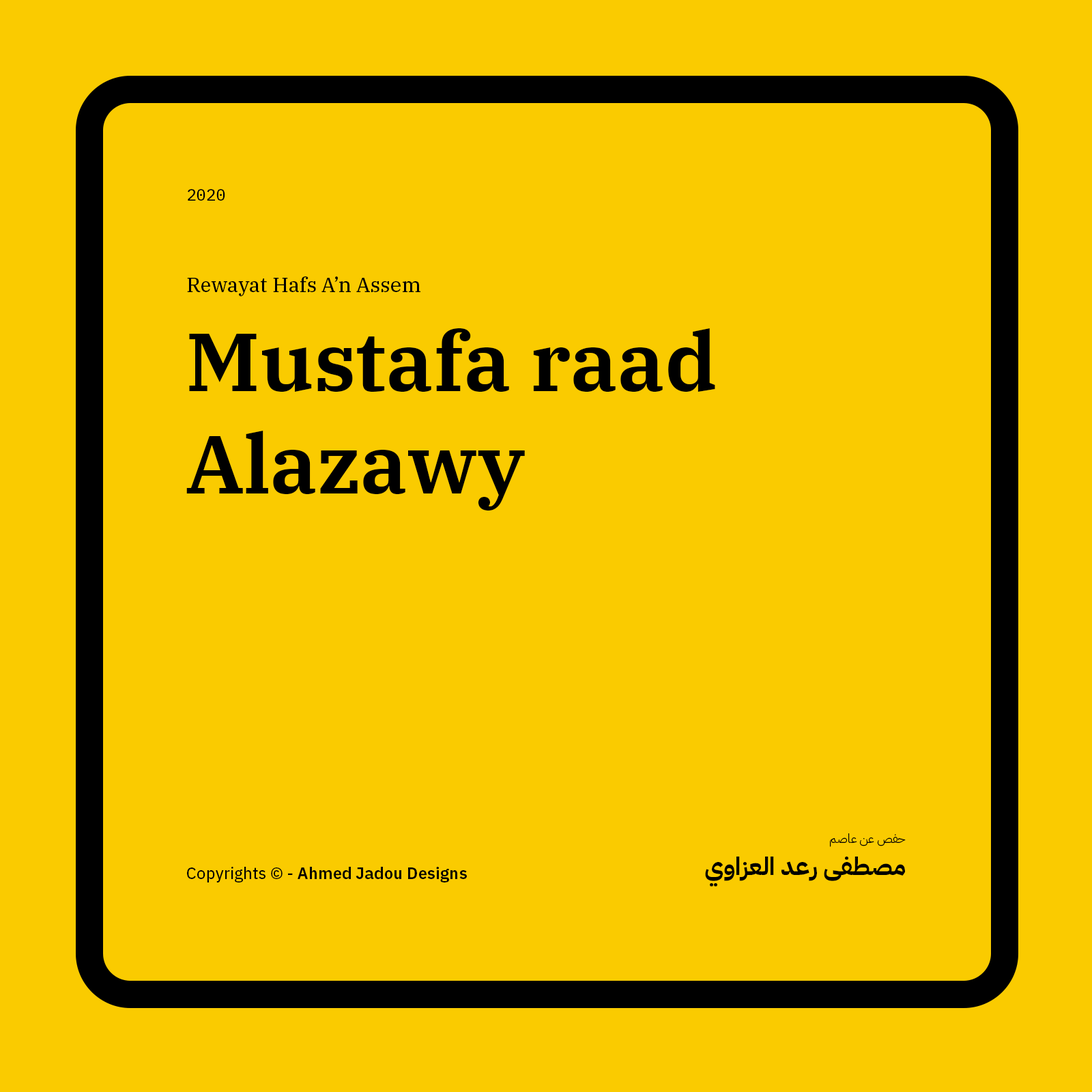
<style>
.page{position:relative;width:1092px;height:1092px;background:#facb00}
.page>*{position:absolute;margin:0}
.t1{font:16.4px "IBMPlexMono-Text";color:#000000}
.t2{font:20.5px "IBMPlexSerif-Text";color:#000000}
.t3{font:81.9px/102.7px "IBMPlexSerif-SemiBold";color:#000000}
.t4{font:12.3px "IBMPlexArabic-Light";color:#000000}
.t5{font:24.6px "IBMPlexArabic-Bold";color:#000000}
.t6{font:16.4px "IBMPlexSans-SemiBold";color:#000000}
.t7{font:16.4px "IBMPlexSans-Text";color:#000000}
</style>
<div class="page">
<p class="t1" style="left:188px;top:189px;width:37px;height:12px">2020</p>
<p class="t2" style="left:187px;top:276px;width:233px;height:20px">Rewayat Hafs A’n Assem</p>
<p class="t3" style="left:186px;top:328px;width:529px;height:183px">Mustafa raad Alazawy</p>
<p class="t4" style="left:830px;top:833px;width:76px;height:14px">حفص عن عاصم</p>
<p class="t5" style="left:705px;top:857px;width:200px;height:30px">مصطفى رعد العزاوي</p>
<p class="t6" style="left:187px;top:867px;width:280px;height:15px"><span class="t7">Copyrights © - </span>Ahmed Jadou Designs</p>
</div>
